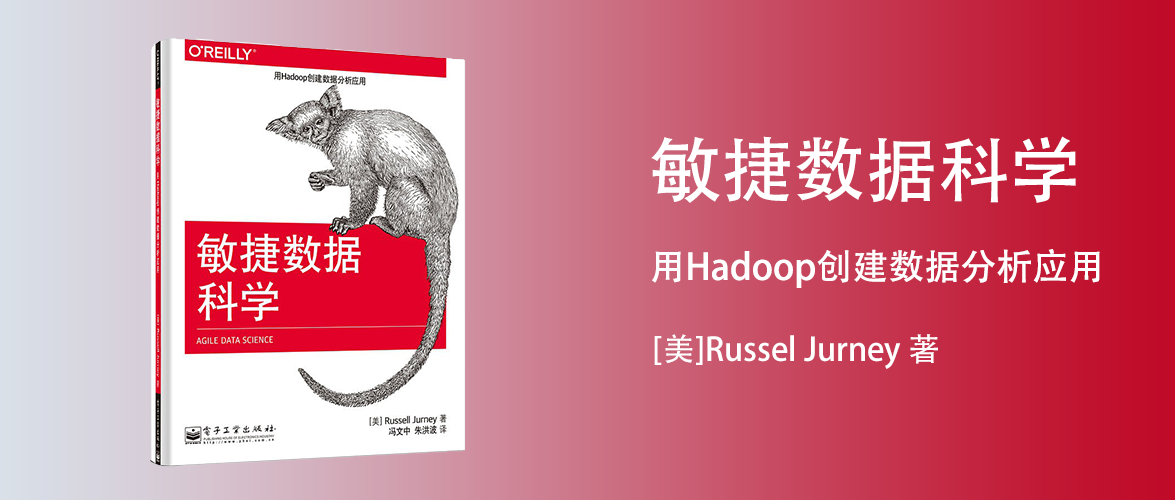
<style>
.page{position:relative;width:1175px;height:500px}
.page>*{position:absolute;margin:0}
.t1{font:72px "AdobeHeitiStd-Regular";color:#ffffff}
.t2{font:36px "AdobeHeitiStd-Regular";color:#ffffff}
.t3{font:32px "AdobeHeitiStd-Regular";color:#ffffff}
</style>
<div class="page">
<p class="t1" style="left:651px;top:136px;width:425px;height:67px">敏捷数据科学</p>
<p class="t2" style="left:652px;top:249px;width:448px;height:39px">用Hadoop创建数据分析应用</p>
<p class="t3" style="left:654px;top:334px;width:284px;height:35px">[美]Russel Jurney 著</p>
</div>
